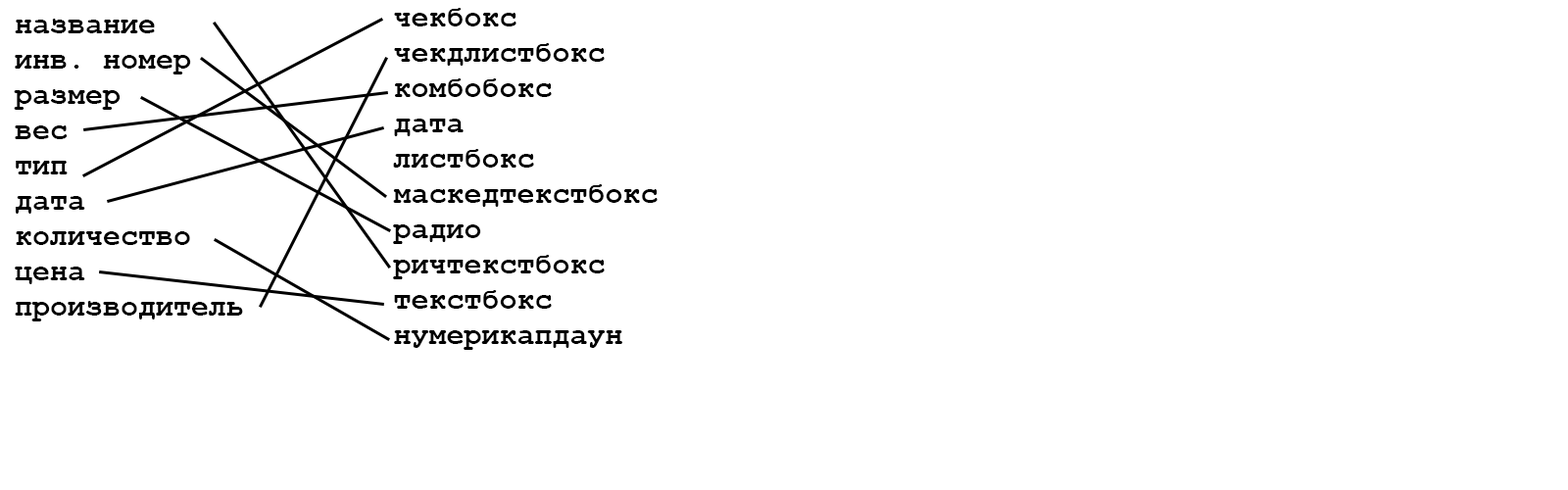
<style>
.page{position:relative;width:1568px;height:490px;background:#ffffff}
.page>*{position:absolute;margin:0}
.t1{font:29.4px "CourierNewPS-BoldMT";color:#000000}
</style>
<div class="page">
<p class="t1" style="left:393px;top:8px;width:265px;height:342px">чекбокс<br>чекдлистбокс<br>комбобокс<br>дата<br>листбокс<br>маскедтекстбокс<br>радио<br>ричтекстбокс<br>текстбокс<br>нумерикапдаун</p>
<p class="t1" style="left:14px;top:19px;width:229px;height:302px">название<br>инв. номер<br>размер<br>вес<br>тип<br>дата<br>количество<br>цена<br>производитель</p>
</div>
